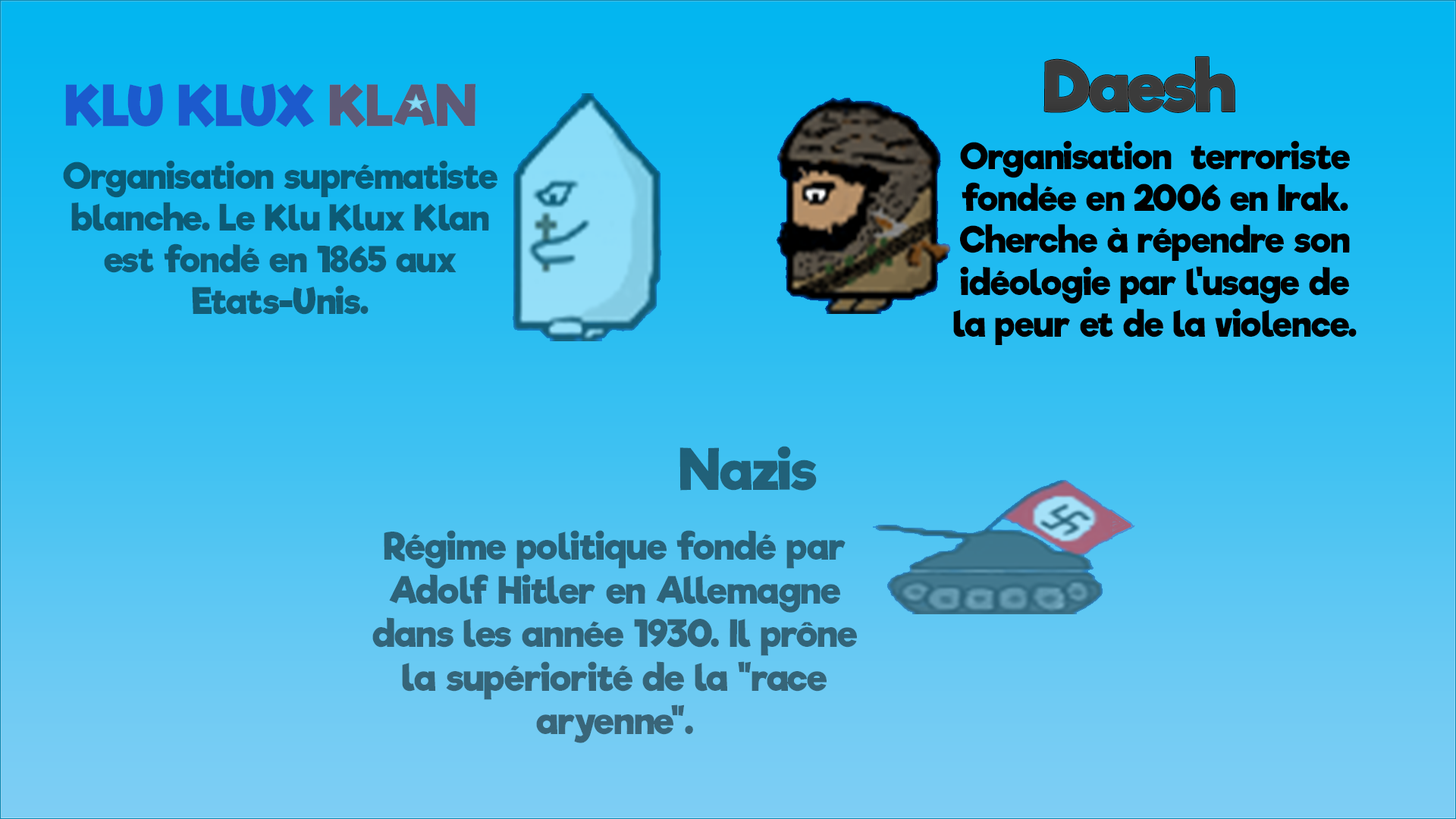
<style>
.page{position:relative;width:1456px;height:819px}
.page>*{position:absolute;margin:0}
.t1{font:67.5px "RifficFree-Bold";color:#3b3b3b}
.t2{font:54.6px "RifficFree-Bold"}
.t3{font:34.9px "RifficFree-Bold";color:#000000}
.t4{font:34.9px "RifficFree-Bold";color:#0d5b76}
.t5{font:54.6px "RifficFree-Bold";color:#216179}
.t6{font:36.4px "RifficFree-Bold";color:#316479}
</style>
<div class="page">
<p class="t1" style="left:1044px;top:57px;width:191px;height:55px">Daesh</p>
<p class="t2" style="left:65px;top:83px;width:410px;height:45px">KLU KLUX KLAN</p>
<p class="t3" style="left:953px;top:140px;width:404px;height:205px;text-align:center">Organisation  terroriste fondée en 2006 en Irak.<br>Cherche à répendre son idéologie par l'usage de la peur et de la violence.</p>
<p class="t4" style="left:63px;top:160px;width:434px;height:155px;text-align:center">Organisation suprématiste blanche. Le Klu Klux Klan est fondé en 1865 aux Etats-Unis.</p>
<p class="t5" style="left:679px;top:446px;width:138px;height:45px">Nazis</p>
<p class="t6" style="left:372px;top:530px;width:485px;height:213px;text-align:center">Régime politique fondé par Adolf Hitler en Allemagne dans les année 1930. Il prône la supériorité de la "race aryenne".</p>
</div>
